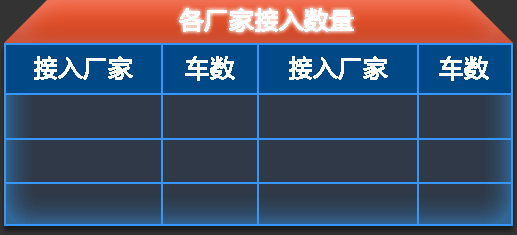
<style>
.page{position:relative;width:517px;height:235px;background:#2f3947}
.page>*{position:absolute;margin:0}
.t1{font:24px "MicrosoftYaHei";color:#ffffff;font-weight:bold}
</style>
<div class="page">
<p class="t1" style="left:179px;top:8px;width:175px;height:24px">各厂家接入数量</p>
<p class="t1" style="left:34px;top:56px;width:99px;height:24px">接入厂家</p>
<p class="t1" style="left:185px;top:56px;width:50px;height:25px">车数</p>
<p class="t1" style="left:289px;top:56px;width:99px;height:24px">接入厂家</p>
<p class="t1" style="left:439px;top:56px;width:50px;height:25px">车数</p>
</div>
